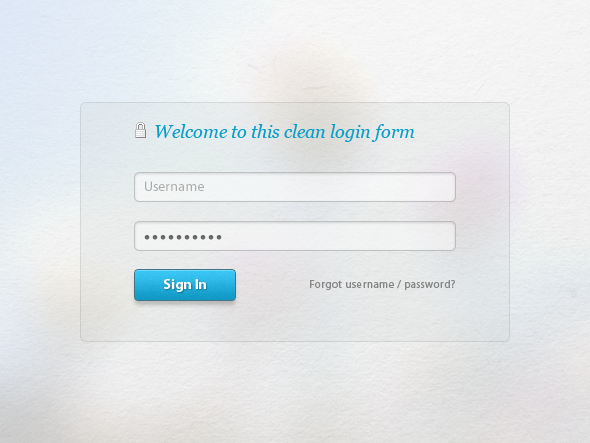
<style>
.page{position:relative;width:590px;height:443px}
.page>*{position:absolute;margin:0}
.t1{font:18px "Georgia-Italic";color:#099ec9}
.t2{font:14px "MyriadPro-Regular";letter-spacing:0.005em;color:#acacac}
.t3{font:40px "IskoolaPota";letter-spacing:-0.05em;color:#666666}
.t4{font:14px "MyriadPro-Bold";color:#ffffff}
.t5{font:11px "MyriadPro-Regular";letter-spacing:0.04em;color:#868686}
</style>
<div class="page">
<p class="t1" style="left:155px;top:124px;width:260px;height:18px">Welcome to this clean login form</p>
<p class="t2" style="left:145px;top:181px;width:59px;height:10px">Username</p>
<p class="t3" style="left:144px;top:235px;width:78px;height:5px">..........</p>
<p class="t4" style="left:164px;top:279px;width:42px;height:13px">Sign In</p>
<p class="t5" style="left:310px;top:280px;width:145px;height:10px">Forgot username / password?</p>
</div>
